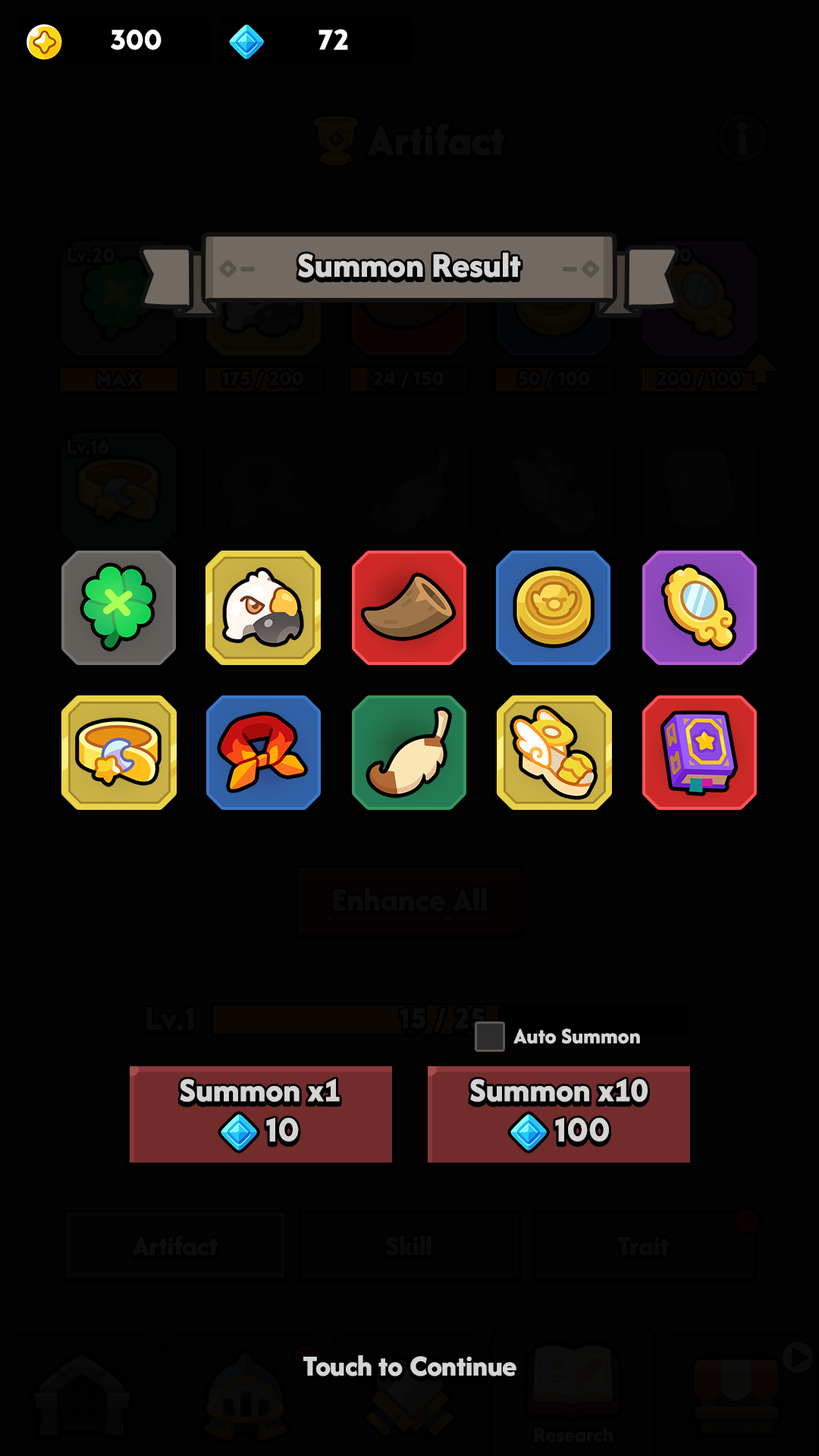
<style>
.page{position:relative;width:819px;height:1456px;background:#020202}
.page>*{position:absolute;margin:0}
.t1{font:29.6px "LTAvocado-Bold";color:#ffffff}
.t2{font:36px "AfacadFlux-ExtraBold";color:#d6d4d3}
.t3{font:22.7px "AfacadFlux-ExtraBold";color:#d6d4d3}
.t4{font:34.9px "AfacadFlux-ExtraBold";color:#d6d4d3}
.t5{font:35px "LTAvocado-Bold";color:#d6d4d3}
.t6{font:30.3px "AfacadFlux-ExtraBold";color:#d6d4d3}
</style>
<div class="page">
<p class="t1" style="left:111px;top:30px;width:51px;height:20px">300</p>
<p class="t1" style="left:318px;top:29px;width:30px;height:21px">72</p>
<p class="t2" style="left:298px;top:253px;width:223px;height:25px">Summon Result</p>
<p class="t3" style="left:513px;top:1028px;width:127px;height:16px">Auto Summon</p>
<p class="t4" style="left:180px;top:1078px;width:160px;height:24px">Summon x1</p>
<p class="t4" style="left:470px;top:1078px;width:178px;height:24px">Summon x10</p>
<p class="t5" style="left:266px;top:1118px;width:33px;height:24px">10</p>
<p class="t5" style="left:555px;top:1118px;width:54px;height:24px">100</p>
<p class="t6" style="left:303px;top:1355px;width:213px;height:21px">Touch to Continue</p>
</div>
